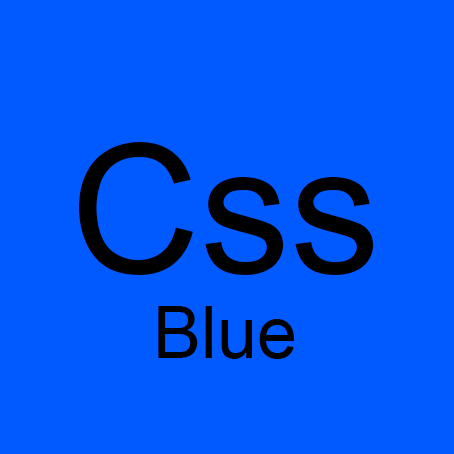
<style>
.page{position:relative;width:454px;height:454px;background:#005aff}
.page>*{position:absolute;margin:0}
.t1{font:180.1px "ArialMT";color:#000000}
.t2{font:72px "ArialMT";color:#000000}
</style>
<div class="page">
<p class="t1" style="left:78px;top:142px;width:296px;height:133px">Css</p>
<p class="t2" style="left:158px;top:306px;width:137px;height:53px">Blue</p>
</div>
